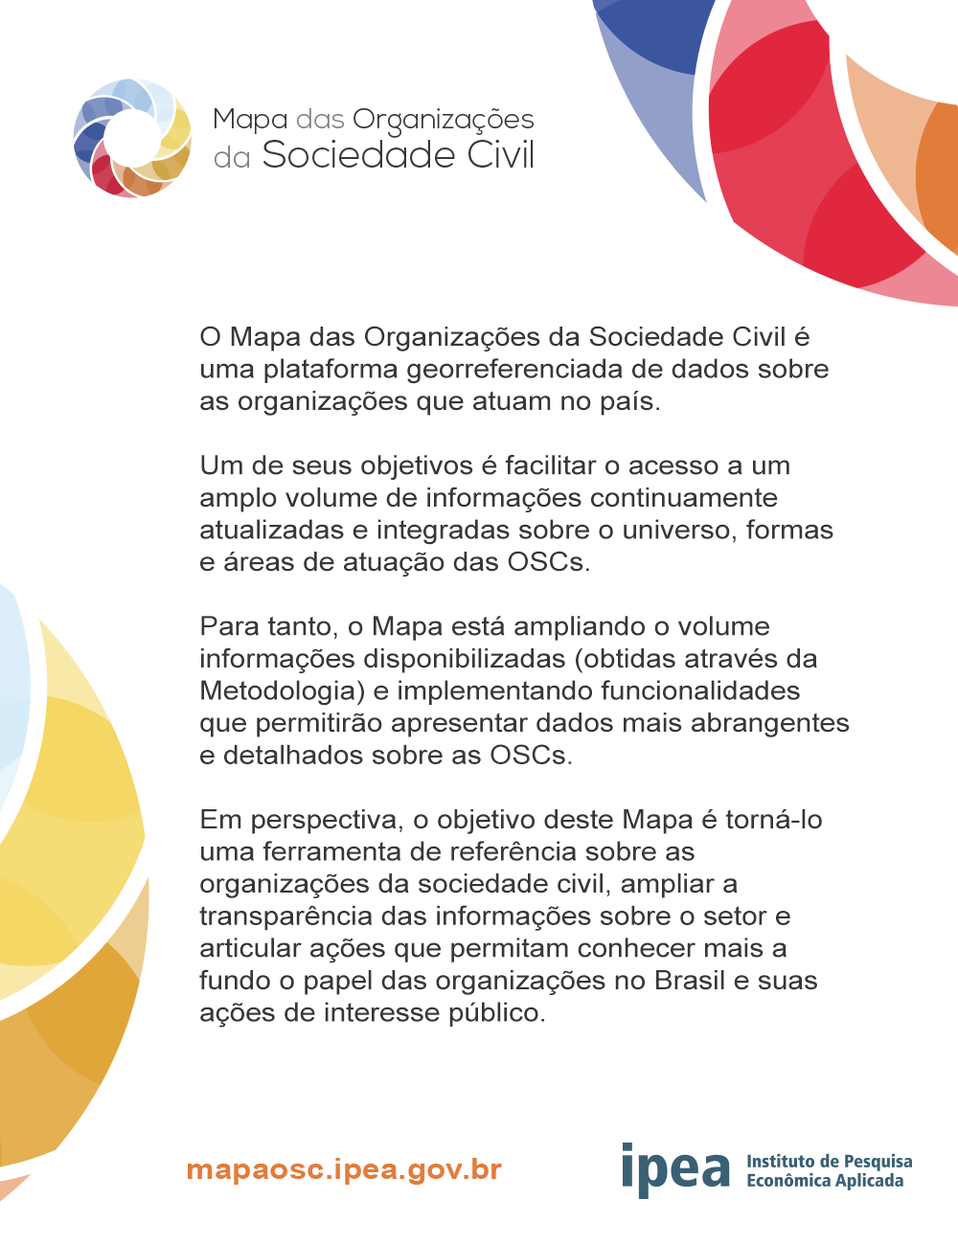
<style>
.page{position:relative;width:958px;height:1245px;background:#ffffff}
.page>*{position:absolute;margin:0}
.t1{font:26.8px "ArialMT";color:#373737;scale:1.07 1}
.t2{font:30px "Arial-BoldMT";color:#e27c3b;scale:1.07 1}
</style>
<div class="page">
<p class="t1" style="left:199px;top:326px;width:651px;height:702px">O Mapa das Organizações da Sociedade Civil é uma plataforma georreferenciada de dados sobre as organizações que atuam no país.<br><br>Um de seus objetivos é facilitar o acesso a um amplo volume de informações continuamente atualizadas e integradas sobre o universo, formas e áreas de atuação das OSCs. <br><br>Para tanto, o Mapa está ampliando o volume informações disponibilizadas (obtidas através da Metodologia) e implementando funcionalidades que permitirão apresentar dados mais abrangentes e detalhados sobre as OSCs. <br><br>Em perspectiva, o objetivo deste Mapa é torná-lo uma ferramenta de referência sobre as organizações da sociedade civil, ampliar a transparência das informações sobre o setor e articular ações que permitam conhecer mais a fundo o papel das organizações no Brasil e suas ações de interesse público.</p>
<p class="t2" style="left:188px;top:1158px;width:314px;height:27px">mapaosc.ipea.gov.br</p>
</div>
